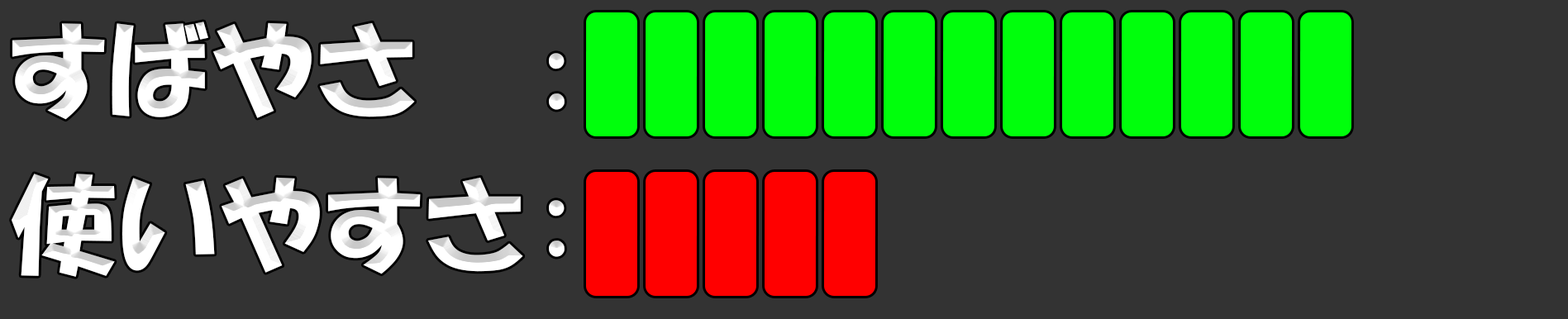
<style>
.page{position:relative;width:1568px;height:319px;background:#333333}
.page>*{position:absolute;margin:0}
.t1{font:107.6px "HGPSoeiKakupoptai";letter-spacing:0.025em;color:#ffffff}
.t2{font:107.5px "HGPSoeiKakupoptai";letter-spacing:0.025em;color:#ffffff}
</style>
<div class="page">
<p class="t1" style="left:12px;top:21px;width:403px;height:99px">すばやさ</p>
<p class="t2" style="left:549px;top:53px;width:16px;height:57px">:</p>
<p class="t1" style="left:12px;top:174px;width:511px;height:103px">使いやすさ</p>
<p class="t2" style="left:549px;top:200px;width:16px;height:57px">:</p>
</div>
